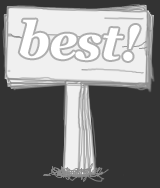
<style>
.page{position:relative;width:160px;height:188px;background:#333333}
.page>*{position:absolute;margin:0}
.t1{font:50.2px "Georgia-BoldItalic";letter-spacing:-0.025em;color:#ffffff}
</style>
<div class="page">
<p class="t1" style="left:19px;top:19px;width:121px;height:42px;rotate:2deg">best!</p>
</div>
